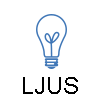
<style>
.page{position:relative;width:100px;height:100px;background:#ffffff}
.page>*{position:absolute;margin:0}
.t1{font:24px "ArialMT";color:#000000}
</style>
<div class="page">
<p class="t1" style="left:23px;top:77px;width:55px;height:17px">LJUS</p>
</div>
